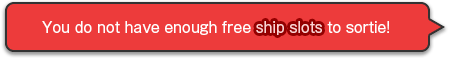
<style>
.page{position:relative;width:450px;height:58px;background:#ed3b3b}
.page>*{position:absolute;margin:0}
.t1{font:14px "GothicMB101Pro-Regular";color:#ffffff}
.t2{font:14px "GothicMB101Pro-Regular";color:#ffd3d3}
</style>
<div class="page">
<p class="t1" style="left:42px;top:21px;width:347px;height:14px">You do not have enough free <span class="t2">ship slots</span> to sortie!</p>
<p class="t1" style="left:42px;top:21px;width:347px;height:14px">You do not have enough free <span class="t2">ship slots</span> to sortie!</p>
</div>
